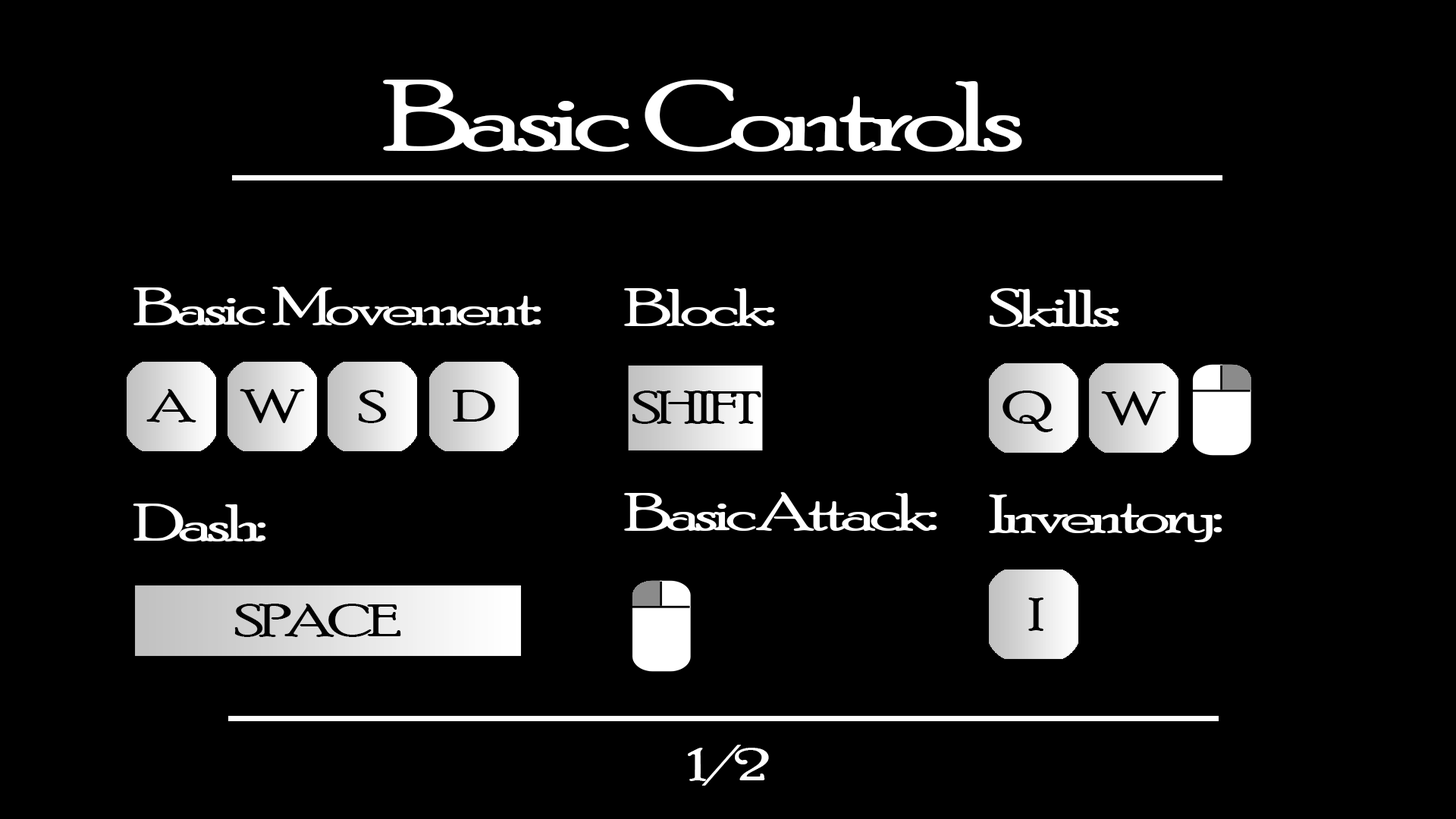
<style>
.page{position:relative;width:1456px;height:819px;background:#000000}
.page>*{position:absolute;margin:0}
.t1{font:99.6px "PoorRichard-Regular";letter-spacing:-0.08em;color:#ffffff;scale:1.45 1}
.t2{font:53.4px "PoorRichard-Regular";letter-spacing:-0.08em;color:#ffffff;scale:1.45 1}
.t3{font:45.5px "PoorRichard-Regular";letter-spacing:-0.08em;color:#000000;scale:1.45 1}
.t4{font:45.5px "PoorRichard-Regular";letter-spacing:-0.08em;color:#010101;scale:1.45 1}
.t5{font:45.5px "PoorRichard-Regular";letter-spacing:-0.08em;color:#ffffff;scale:1.45 1}
</style>
<div class="page">
<p class="t1" style="left:383px;top:80px;width:639px;height:72px">Basic  Controls</p>
<p class="t2" style="left:133px;top:287px;width:408px;height:38px">Basic  Movement:</p>
<p class="t2" style="left:624px;top:288px;width:151px;height:38px">Block:</p>
<p class="t2" style="left:990px;top:288px;width:129px;height:39px">Skills:</p>
<p class="t3" style="left:146px;top:389px;width:50px;height:33px">A</p>
<p class="t3" style="left:240px;top:389px;width:65px;height:34px">W</p>
<p class="t3" style="left:358px;top:390px;width:29px;height:33px">S</p>
<p class="t3" style="left:452px;top:390px;width:43px;height:32px">D</p>
<p class="t3" style="left:632px;top:391px;width:129px;height:33px">SHIFT</p>
<p class="t3" style="left:1003px;top:391px;width:50px;height:41px">Q</p>
<p class="t3" style="left:1101px;top:391px;width:65px;height:34px">W</p>
<p class="t2" style="left:624px;top:492px;width:313px;height:39px">Basic Attack:</p>
<p class="t2" style="left:989px;top:494px;width:233px;height:48px">Inventory:</p>
<p class="t2" style="left:133px;top:504px;width:133px;height:37px">Dash:</p>
<p class="t4" style="left:234px;top:604px;width:167px;height:33px">SPACE</p>
<p class="t3" style="left:1028px;top:598px;width:15px;height:33px">I</p>
<p class="t5" style="left:688px;top:745px;width:81px;height:41px">1/2</p>
</div>
